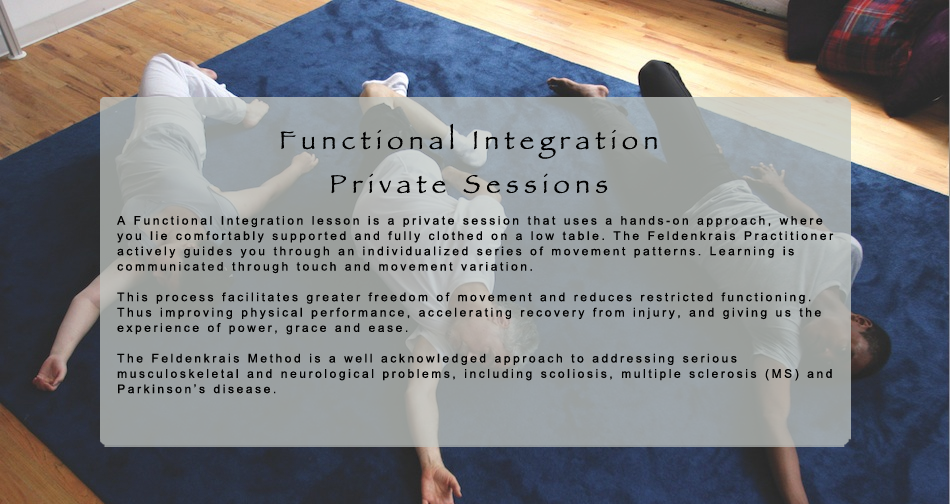
<style>
.page{position:relative;width:950px;height:504px}
.page>*{position:absolute;margin:0}
.t1{font:45.1px/43.9px "Papyrus";letter-spacing:0.22em;color:#000000}
.t2{font:20.4px/15.3px "ArialMT";letter-spacing:0.22em;color:#000000}
</style>
<div class="page">
<p class="t1" style="left:280px;top:123px;width:377px;height:71px;text-align:center">Functional Integration<br>Private Sessions</p>
<p class="t2" style="left:117px;top:216px;width:717px;height:178px">A Functional Integration lesson is a private session that uses a hands-on approach, where <br>you lie comfortably supported and fully clothed on a low table. The Feldenkrais Practitioner <br>actively guides you through an individualized series of movement patterns. Learning is <br>communicated through touch and movement variation.<br><br>This process facilitates greater freedom of movement and reduces restricted functioning. <br>Thus improving physical performance, accelerating recovery from injury, and giving us the <br>experience of power, grace and ease.<br><br>The Feldenkrais Method is a well acknowledged approach to addressing serious <br>musculoskeletal and neurological problems, including scoliosis, multiple sclerosis (MS) and <br>Parkinson’s disease.</p>
</div>
